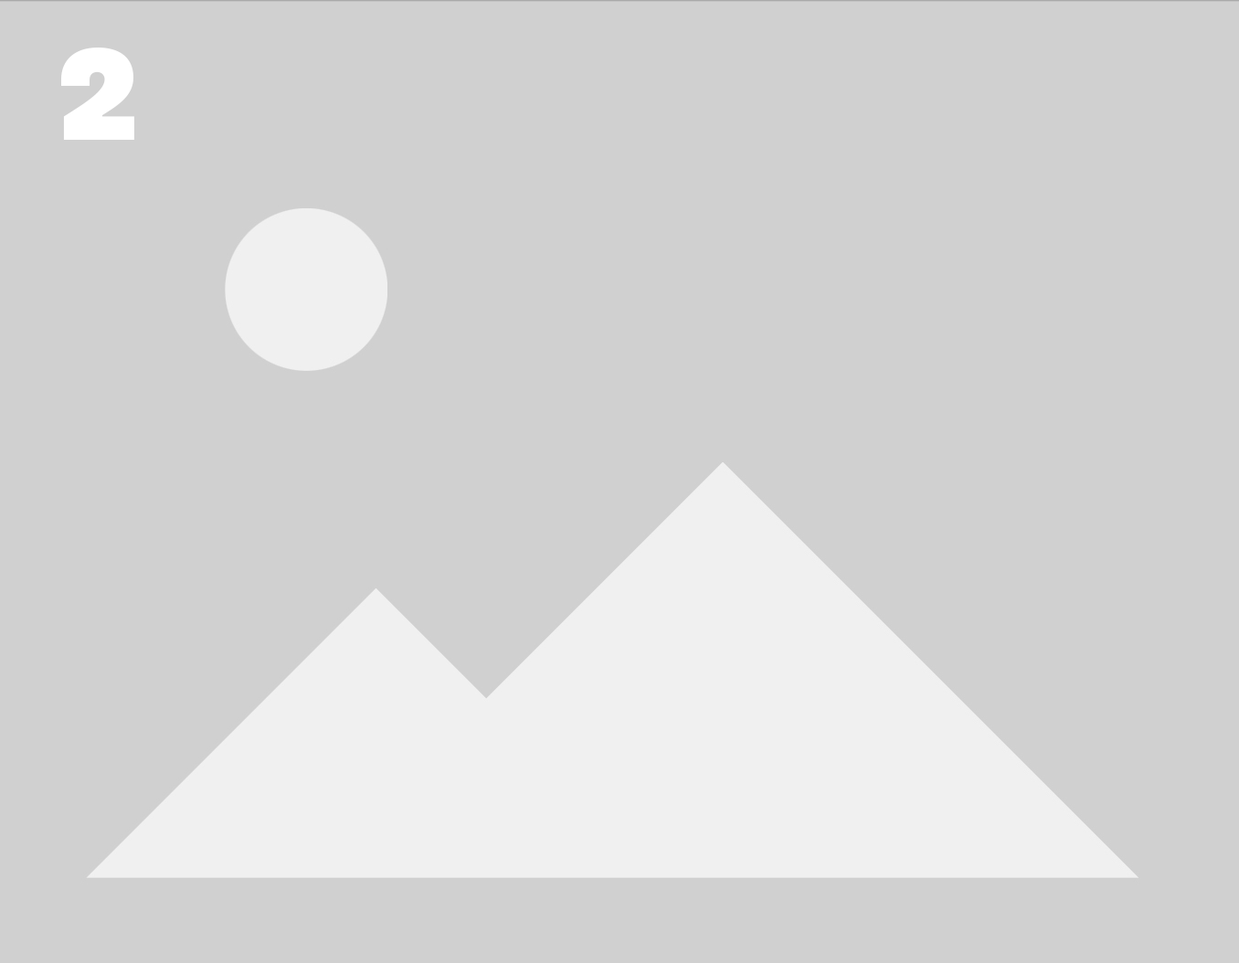
<style>
.page{position:relative;width:1239px;height:963px;background:#d0d0d0}
.page>*{position:absolute;margin:0}
.t1{font:129.7px "Alfarn2";color:#ffffff}
</style>
<div class="page">
<p class="t1" style="left:61px;top:47px;width:73px;height:93px">2</p>
</div>
